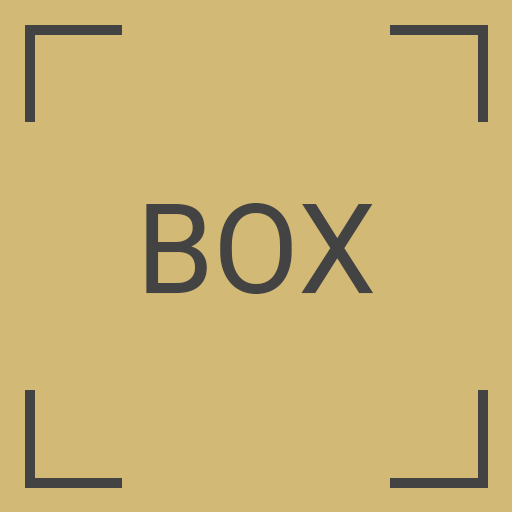
<style>
.page{position:relative;width:512px;height:512px;background:#d3b976}
.page>*{position:absolute;margin:0}
.t1{font:125px "Roboto-Regular";color:#434343}
</style>
<div class="page">
<p class="t1" style="left:146px;top:203px;width:228px;height:91px">BOX</p>
</div>
